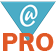
<style>
.page{position:relative;width:56px;height:56px;background:#ffffff}
.page>*{position:absolute;margin:0}
.t1{font:24px "Muli-Black";color:#e05826}
</style>
<div class="page">
<p class="t1" style="left:3px;top:33px;width:51px;height:18px">PRO</p>
</div>
